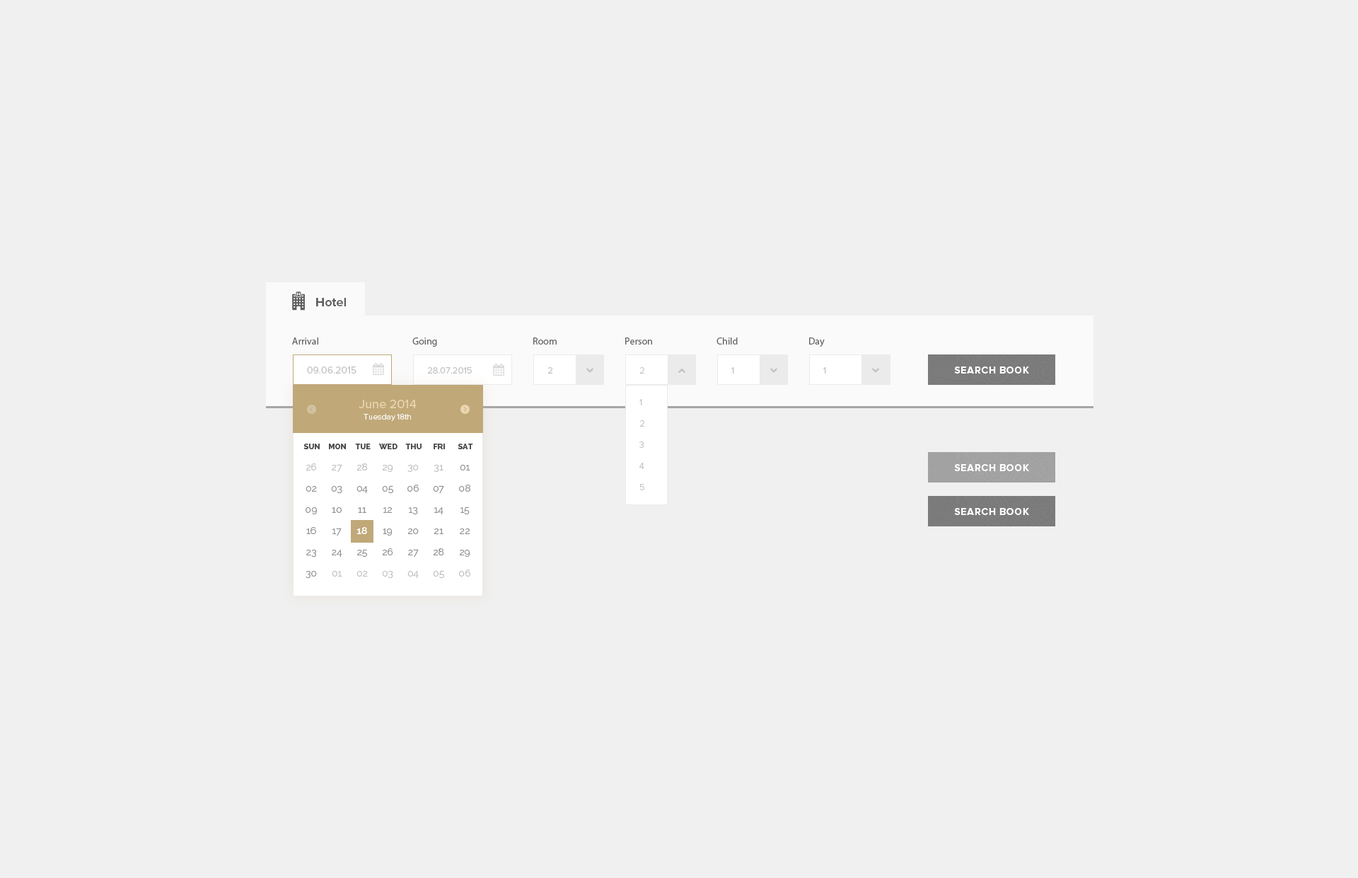
<style>
.page{position:relative;width:1358px;height:878px;background:#f0f0f0}
.page>*{position:absolute;margin:0}
.t1{font:12.7px "ProximaNova-Bold";color:#5f5f5f}
.t2{font:9.9px "MyriadPro-Regular";color:#636363}
.t3{font:9.9px "ProximaNova-Regular";color:#c2c2c2}
.t4{font:9.2px "ProximaNova-Regular";color:#c2c2c2}
.t5{font:9.2px "ProximaNova-Light";color:#c2c2c2}
.t6{font:9.9px "ProximaNova-Bold";letter-spacing:0.05em;color:#ffffff;text-transform:uppercase}
.t7{font:12.7px "ProximaNova-Regular";color:#e9d6af}
.t8{font:9.2px/21.2px "ProximaNova-Light";color:#c2c2c2}
.t9{font:8.5px "ProximaNova-Light";color:#ffffff}
.t10{font:7.8px "Raleway-ExtraBold";color:#464646;text-transform:uppercase}
.t11{font:9.9px "Raleway-Regular";color:#c2c2c2}
.t12{font:9.9px "Raleway-Regular";color:#959595}
.t13{font:9.9px "Raleway-SemiBold";color:#ffffff}
</style>
<div class="page">
<p class="t1" style="left:316px;top:298px;width:30px;height:8px">Hotel</p>
<p class="t2" style="left:292px;top:337px;width:26px;height:8px">Arrival</p>
<p class="t2" style="left:412px;top:337px;width:25px;height:10px">Going</p>
<p class="t2" style="left:533px;top:337px;width:24px;height:8px">Room</p>
<p class="t2" style="left:625px;top:337px;width:27px;height:8px">Person</p>
<p class="t2" style="left:717px;top:337px;width:21px;height:8px">Child</p>
<p class="t2" style="left:809px;top:337px;width:16px;height:10px">Day</p>
<p class="t3" style="left:307px;top:366px;width:50px;height:8px">09.06.2015</p>
<p class="t4" style="left:427px;top:367px;width:45px;height:7px">28.07.2015</p>
<p class="t4" style="left:548px;top:367px;width:4px;height:7px">2</p>
<p class="t5" style="left:640px;top:367px;width:4px;height:7px">2</p>
<p class="t4" style="left:731px;top:367px;width:3px;height:7px">1</p>
<p class="t4" style="left:823px;top:367px;width:3px;height:7px">1</p>
<p class="t6" style="left:954px;top:366px;width:75px;height:8px">Search book</p>
<p class="t7" style="left:359px;top:400px;width:58px;height:8px">June 2014</p>
<p class="t8" style="left:640px;top:399px;width:4px;height:91px">1<br>2<br>3<br>4<br>5</p>
<p class="t9" style="left:364px;top:414px;width:47px;height:7px">Tuesday 18th</p>
<p class="t10" style="left:303px;top:444px;width:17px;height:5px">Sun</p>
<p class="t10" style="left:329px;top:444px;width:17px;height:5px">Mon</p>
<p class="t10" style="left:355px;top:444px;width:16px;height:5px">Tue</p>
<p class="t10" style="left:379px;top:444px;width:19px;height:5px">Wed</p>
<p class="t10" style="left:405px;top:444px;width:17px;height:5px">Thu</p>
<p class="t10" style="left:434px;top:444px;width:11px;height:5px">Fri</p>
<p class="t10" style="left:458px;top:444px;width:15px;height:5px">Sat</p>
<p class="t11" style="left:306px;top:463px;width:11px;height:7px">26</p>
<p class="t11" style="left:332px;top:464px;width:10px;height:8px">27</p>
<p class="t11" style="left:357px;top:463px;width:11px;height:7px">28</p>
<p class="t11" style="left:382px;top:464px;width:11px;height:9px">29</p>
<p class="t11" style="left:407px;top:464px;width:12px;height:9px">30</p>
<p class="t11" style="left:434px;top:464px;width:10px;height:9px">31</p>
<p class="t12" style="left:460px;top:464px;width:10px;height:6px">01</p>
<p class="t6" style="left:954px;top:464px;width:75px;height:7px">Search book</p>
<p class="t12" style="left:306px;top:485px;width:11px;height:7px">02</p>
<p class="t12" style="left:331px;top:485px;width:11px;height:9px">03</p>
<p class="t12" style="left:357px;top:485px;width:11px;height:8px">04</p>
<p class="t12" style="left:382px;top:485px;width:11px;height:9px">05</p>
<p class="t12" style="left:407px;top:485px;width:12px;height:7px">06</p>
<p class="t12" style="left:433px;top:485px;width:11px;height:8px">07</p>
<p class="t12" style="left:459px;top:485px;width:11px;height:7px">08</p>
<p class="t12" style="left:306px;top:507px;width:11px;height:8px">09</p>
<p class="t12" style="left:332px;top:507px;width:10px;height:6px">10</p>
<p class="t12" style="left:358px;top:507px;width:8px;height:6px">11</p>
<p class="t12" style="left:383px;top:507px;width:10px;height:6px">12</p>
<p class="t12" style="left:409px;top:507px;width:9px;height:8px">13</p>
<p class="t12" style="left:434px;top:507px;width:10px;height:7px">14</p>
<p class="t12" style="left:461px;top:507px;width:9px;height:8px">15</p>
<p class="t6" style="left:954px;top:508px;width:75px;height:7px">Search book</p>
<p class="t12" style="left:306px;top:527px;width:10px;height:7px">16</p>
<p class="t12" style="left:332px;top:528px;width:10px;height:8px">17</p>
<p class="t13" style="left:357px;top:527px;width:10px;height:7px">18</p>
<p class="t12" style="left:383px;top:528px;width:10px;height:8px">19</p>
<p class="t12" style="left:407px;top:528px;width:12px;height:6px">20</p>
<p class="t12" style="left:434px;top:528px;width:10px;height:6px">21</p>
<p class="t12" style="left:460px;top:528px;width:10px;height:6px">22</p>
<p class="t12" style="left:306px;top:549px;width:10px;height:8px">23</p>
<p class="t12" style="left:332px;top:549px;width:10px;height:8px">24</p>
<p class="t12" style="left:357px;top:549px;width:10px;height:8px">25</p>
<p class="t12" style="left:382px;top:548px;width:11px;height:7px">26</p>
<p class="t12" style="left:408px;top:549px;width:11px;height:8px">27</p>
<p class="t12" style="left:433px;top:548px;width:11px;height:7px">28</p>
<p class="t12" style="left:459px;top:549px;width:11px;height:8px">29</p>
<p class="t11" style="left:459px;top:569px;width:11px;height:8px">06</p>
<p class="t12" style="left:306px;top:570px;width:11px;height:9px">30</p>
<p class="t11" style="left:332px;top:570px;width:10px;height:7px">01</p>
<p class="t11" style="left:357px;top:570px;width:11px;height:7px">02</p>
<p class="t11" style="left:382px;top:570px;width:11px;height:9px">03</p>
<p class="t11" style="left:407px;top:570px;width:12px;height:8px">04</p>
<p class="t11" style="left:433px;top:570px;width:11px;height:9px">05</p>
</div>
